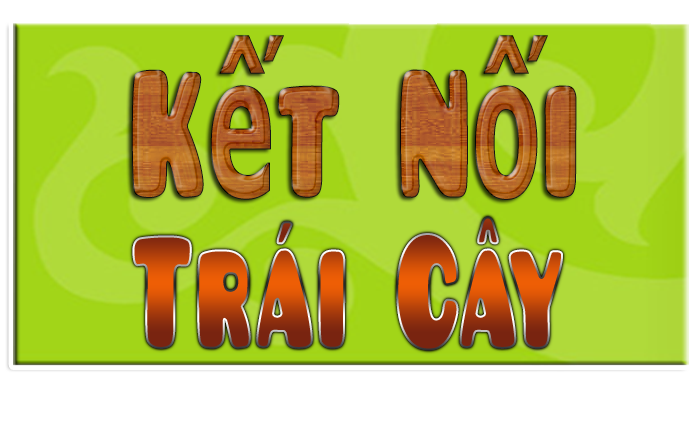
<style>
.page{position:relative;width:700px;height:444px;background:#ffffff}
.page>*{position:absolute;margin:0}
.t1{font:196.2px "Pusab";font-weight:bold;scale:0.56 1}
.t2{font:196.2px "Tahoma-Bold";font-weight:bold;scale:0.56 1}
.t3{font:173.5px "Pusab";font-weight:bold;scale:0.53 1}
</style>
<div class="page">
<p class="t1" style="left:131px;top:35px;width:446px;height:165px">K<span class="t2">ế</span>t N<span class="t2">ố</span>i</p>
<p class="t3" style="left:132px;top:216px;width:431px;height:135px">Trái Cây</p>
</div>
